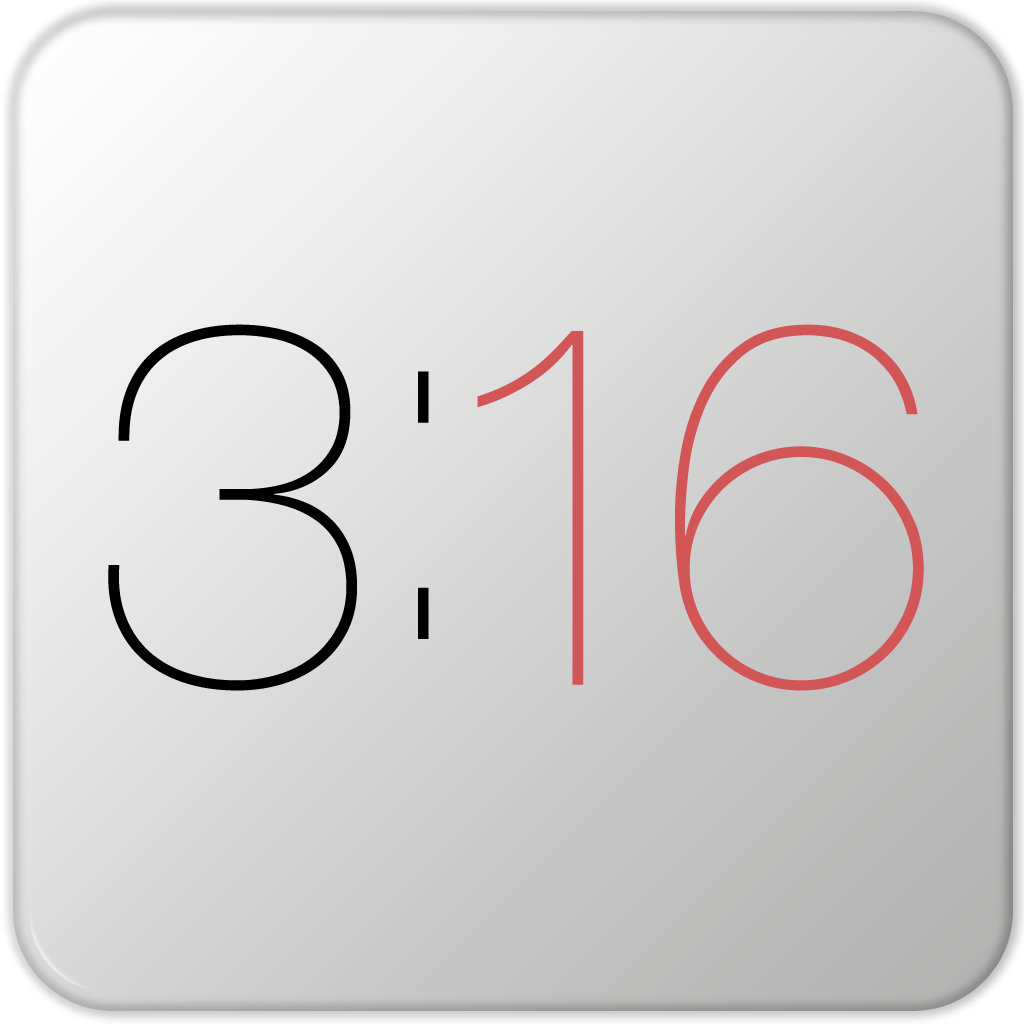
<style>
.page{position:relative;width:1024px;height:1024px}
.page>*{position:absolute;margin:0}
.t1{font:520px "HelveticaNeue-UltraLight";letter-spacing:-0.1em;color:#d25656}
.t2{font:520px "HelveticaNeue-UltraLight";letter-spacing:-0.1em;color:#000000}
</style>
<div class="page">
<p class="t1" style="left:108px;top:324px;width:816px;height:367px"><span class="t2">3 </span>16</p>
<p class="t2" style="left:418px;top:371px;width:11px;height:268px">:</p>
</div>
